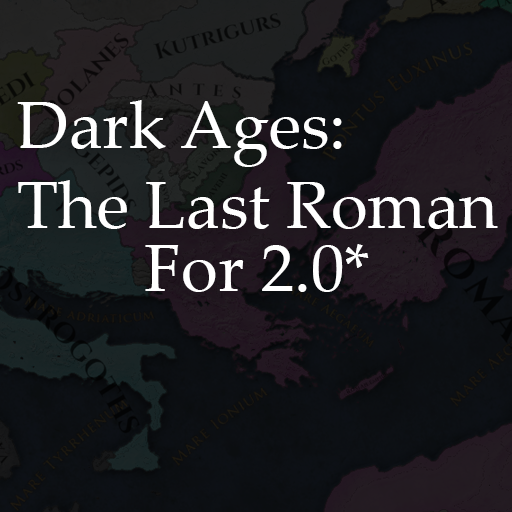
<style>
.page{position:relative;width:512px;height:512px}
.page>*{position:absolute;margin:0}
.t1{font:66.7px "PalatinoLinotype-Roman";color:#ffffff}
</style>
<div class="page">
<p class="t1" style="left:17px;top:100px;width:481px;height:129px">Dark Ages:<br>The Last Roman</p>
<p class="t1" style="left:145px;top:244px;width:224px;height:48px">For 2.0*</p>
</div>
